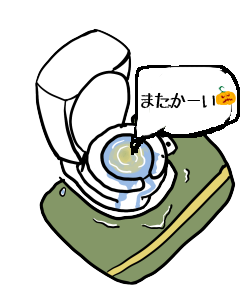
<style>
.page{position:relative;width:246px;height:301px;background:#ffffff}
.page>*{position:absolute;margin:0}
.t1{font:18px "Tanuki-Permanent-Marker";letter-spacing:-0.04em;color:#000000;scale:0.9 1}
</style>
<div class="page">
<p class="t1" style="left:141px;top:92px;width:74px;height:17px">またかーい</p>
</div>
